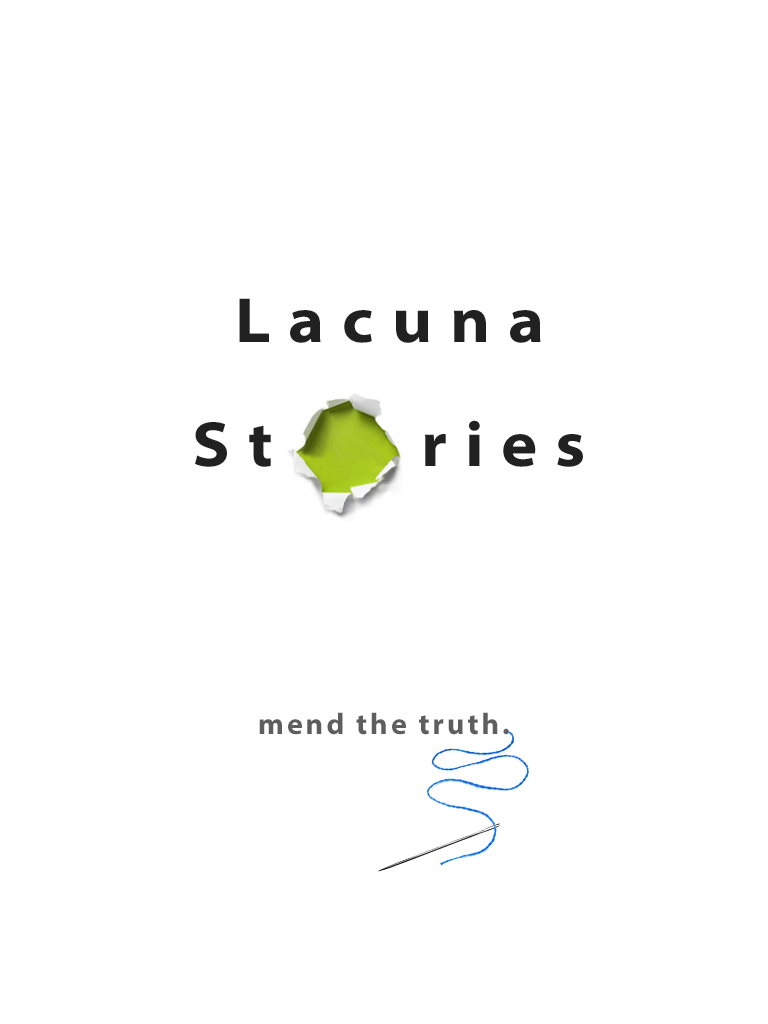
<style>
.page{position:relative;width:768px;height:1024px;background:#ffffff}
.page>*{position:absolute;margin:0}
.t1{font:64px "MyriadPro-BoldSemiExt";letter-spacing:0.28em;color:#212121}
.t2{font:64px "MyriadPro-BoldSemiExt";letter-spacing:0.279em;color:#212121}
.t3{font:30px "MyriadPro-Bold";letter-spacing:0.1em;color:#5e5e5e}
</style>
<div class="page">
<p class="t1" style="left:239px;top:298px;width:302px;height:45px">Lacuna</p>
<p class="t1" style="left:195px;top:422px;width:76px;height:45px">St</p>
<p class="t2" style="left:425px;top:420px;width:158px;height:47px">ries</p>
<p class="t3" style="left:259px;top:712px;width:250px;height:23px">mend the truth.</p>
</div>
